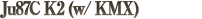
<style>
.page{position:relative;width:202px;height:19px;background:#ffffff}
.page>*{position:absolute;margin:0}
.t1{font:18px "RyuminPro-ExBold";letter-spacing:-0.08em;color:#4a3f32;font-weight:bold;scale:0.9 1}
</style>
<div class="page">
<p class="t1" style="left:0px;top:1px;width:139px;height:18px">Ju87C K2 (w/ KMX)</p>
</div>
